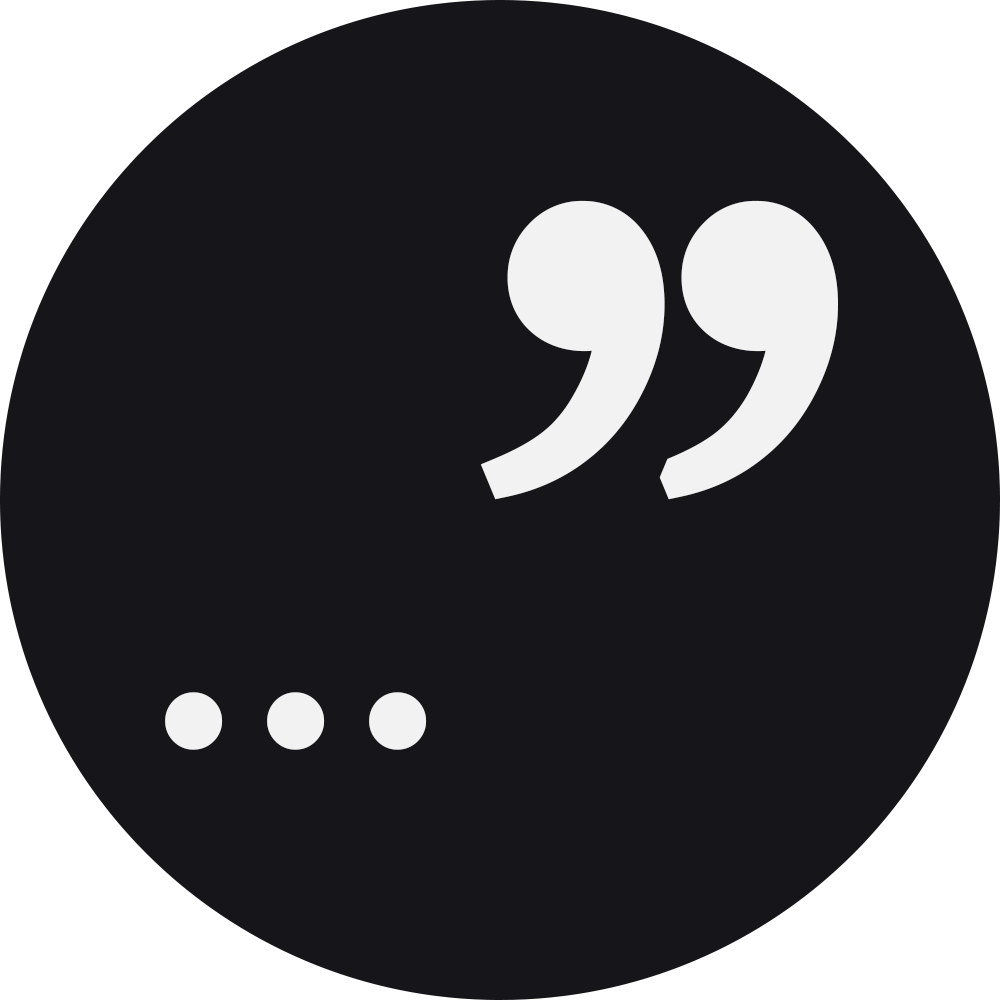
<style>
.page{position:relative;width:1000px;height:1000px;background:#16161a}
.page>*{position:absolute;margin:0}
.t1{font:1041.7px "BaskOldFace";color:#f2f2f2;font-weight:bold}
.t2{font:416.7px "SegoeUI";color:#f2f2f2;font-weight:bold}
</style>
<div class="page">
<p class="t1" style="left:480px;top:200px;width:358px;height:300px">”</p>
<p class="t2" style="left:165px;top:692px;width:262px;height:58px">···</p>
</div>
